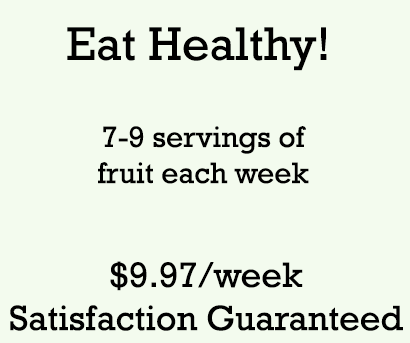
<style>
.page{position:relative;width:410px;height:343px;background:#f3fbee}
.page>*{position:absolute;margin:0}
.t1{font:48px "Rockwell";color:#000000}
.t2{font:30px "Rockwell";color:#000000}
.t3{font:36px "Rockwell";color:#000000}
</style>
<div class="page">
<p class="t1" style="left:67px;top:27px;width:260px;height:44px">Eat Healthy!</p>
<p class="t2" style="left:98px;top:126px;width:211px;height:58px;text-align:center">7-9 servings of<br>fruit each week</p>
<p class="t3" style="left:10px;top:261px;width:393px;height:70px;text-align:center">$9.97/week<br>Satisfaction Guaranteed</p>
</div>
